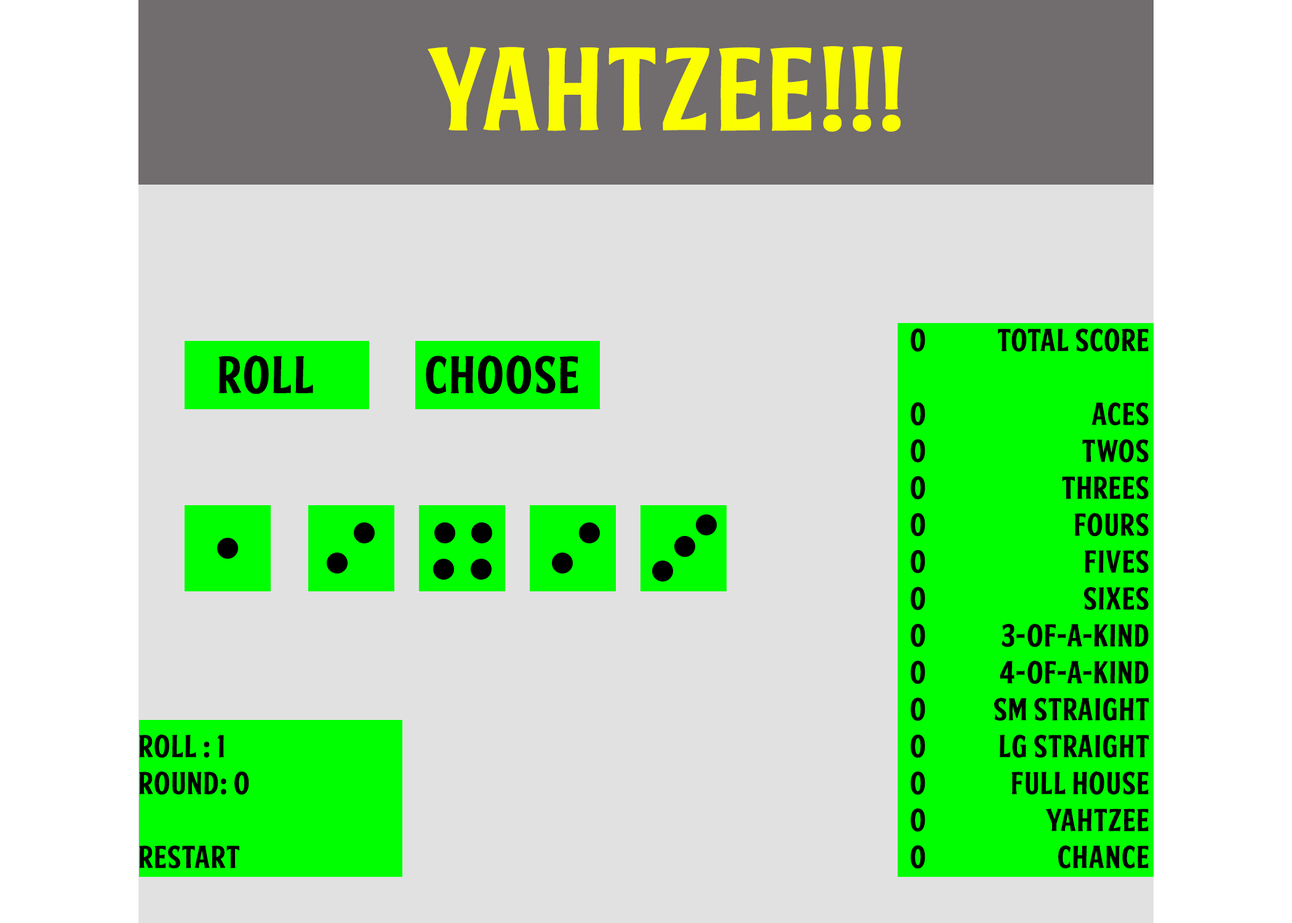
<style>
.page{position:relative;width:1292px;height:923px;background:#e1e1e1}
.page>*{position:absolute;margin:0}
.t1{font:115.4px "FTYSKRADJHUWNNCV2";color:#fcff00;font-weight:bold}
.t2{font:30.8px "FTYSKRADJHUWNNCV2";color:#000000;font-weight:bold}
.t3{font:51.3px "FTYSKRADJHUWNNCV2";color:#000000;font-weight:bold}
.t4{font:7.4px "FTYSKRADJHUWNNCV2";color:#000000;font-weight:bold}
</style>
<div class="page">
<p class="t1" style="left:428px;top:46px;width:475px;height:86px">Yahtzee!!!</p>
<p class="t2" style="left:911px;top:328px;width:14px;height:541px">0<br><br>0<br>0<br>0<br>0<br>0<br>0<br>0<br>0<br>0<br>0<br>0<br>0<br>0</p>
<p class="t2" style="left:994px;top:328px;width:155px;height:541px;text-align:right">Total Score<br><br>Aces<br>Twos<br>Threes<br>Fours<br>Fives<br>Sixes<br>3-of-a-kind<br>4-of-a-kind<br>Sm Straight<br>Lg Straight<br>Full House<br>Yahtzee<br>Chance</p>
<p class="t3" style="left:218px;top:355px;width:95px;height:39px">Roll</p>
<p class="t3" style="left:426px;top:355px;width:152px;height:39px">Choose</p>
<p class="t4" style="left:139px;top:734px;width:110px;height:135px">Roll : 1<br>Round: 0<br><br>Restart</p>
</div>
